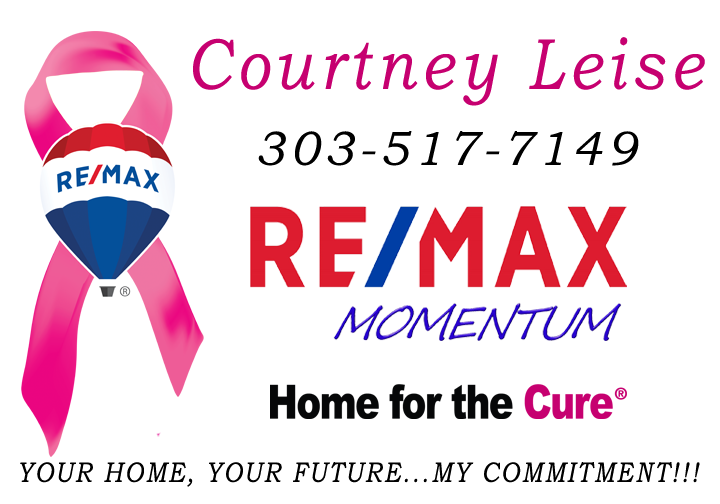
<style>
.page{position:relative;width:720px;height:504px;background:#ffffff}
.page>*{position:absolute;margin:0}
.t1{font:72px "BookmanOldStyle-Italic";letter-spacing:0.1em;color:#c60070;scale:0.85 1}
.t2{font:48px "BookmanOldStyle-Italic";letter-spacing:0.1em;color:#000000}
.t3{font:28px "BookmanOldStyle-Italic";letter-spacing:0.1em;color:#000000;scale:0.85 1}
</style>
<div class="page">
<p class="t1" style="left:193px;top:37px;width:512px;height:69px">Courtney Leise</p>
<p class="t2" style="left:258px;top:131px;width:381px;height:35px">303-517-7149</p>
<p class="t3" style="left:20px;top:462px;width:680px;height:25px">YOUR HOME, YOUR FUTURE...MY COMMITMENT!!!</p>
</div>
